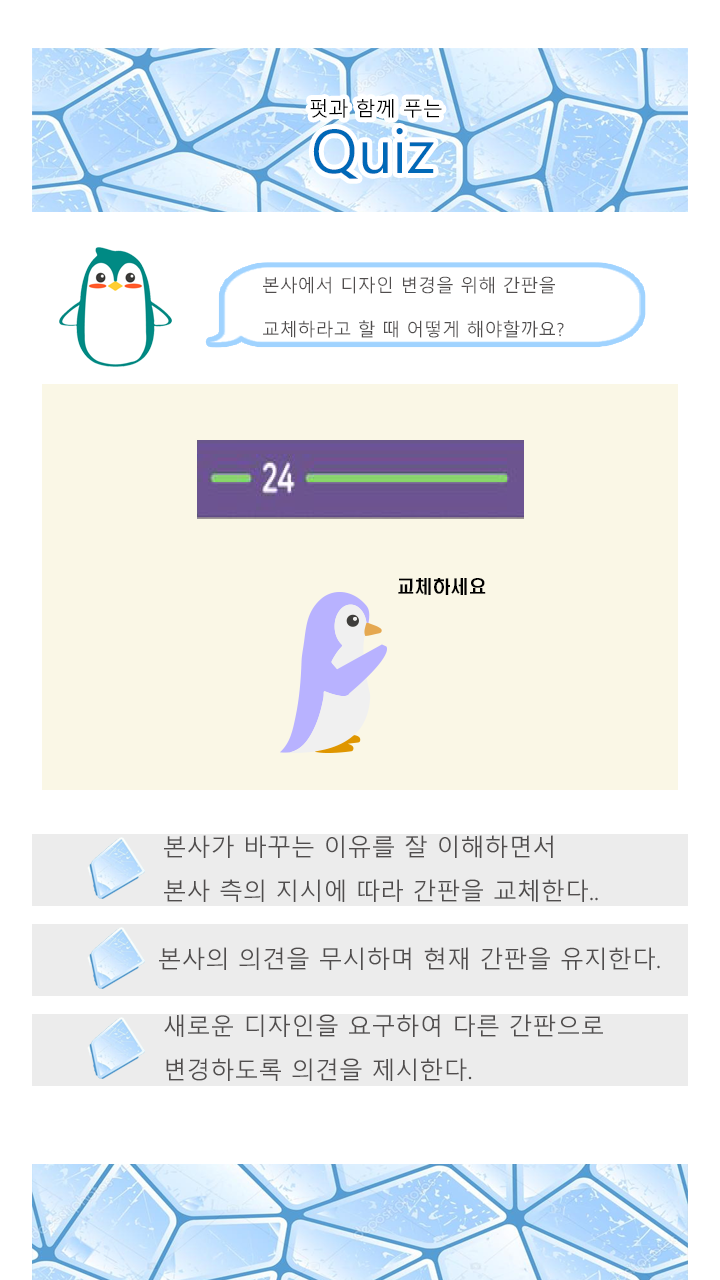
<style>
.page{position:relative;width:720px;height:1280px;background:#ffffff}
.page>*{position:absolute;margin:0}
.t1{font:20px/24px "MalgunGothic";color:#000000}
.t2{font:20px/26px "MalgunGothic";color:#000000}
.t3{font:60px/24px "MalgunGothic";color:#0068b7}
.t4{font:18px/44px "MalgunGothic";color:#504d4d}
.t5{font:18px "H2hdrM";color:#000000}
.t6{font:24px/44px "MalgunGothic";color:#504d4d}
.t7{font:24px "MalgunGothic";color:#504d4d}
</style>
<div class="page">
<p class="t1" style="left:310px;top:99px;width:132px;height:80px;text-align:center"><span class="t2">  </span>펏과 함께 푸는 <br><span class="t3">Quiz</span></p>
<p class="t4" style="left:263px;top:276px;width:301px;height:62px">본사에서 디자인 변경을 위해 간판을 <br>교체하라고 할 때 어떻게 해야할까요?</p>
<p class="t5" style="left:398px;top:578px;width:88px;height:17px">교체하세요</p>
<p class="t6" style="left:164px;top:835px;width:434px;height:67px">본사가 바꾸는 이유를 잘 이해하면서 <br>본사 측의 지시에 따라 간판을 교체한다..</p>
<p class="t7" style="left:159px;top:947px;width:501px;height:23px">본사의 의견을 무시하며 현재 간판을 유지한다.</p>
<p class="t6" style="left:164px;top:1014px;width:439px;height:67px">새로운 디자인을 요구하여 다른 간판으로 <br>변경하도록 의견을 제시한다.</p>
</div>
